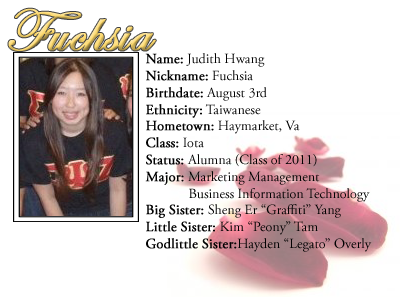
<style>
.page{position:relative;width:400px;height:300px;background:#ffffff}
.page>*{position:absolute;margin:0}
.t1{font:60px "EdwardianScriptITC";font-weight:bold}
.t2{font:14px "AGaramondPro-Regular";color:#000000}
.t3{font:14px "AGaramondPro-Regular";color:#000000;font-weight:bold}
</style>
<div class="page">
<p class="t1" style="left:8px;top:8px;width:148px;height:43px">Fuchsia</p>
<p class="t2" style="left:145px;top:53px;width:227px;height:199px"><span class="t3">Name:</span> Judith Hwang<br><span class="t3">Nickname:</span> Fuchsia<br><span class="t3">Birthdate:</span> August 3rd<br><span class="t3">Ethnicity:</span> Taiwanese<br><span class="t3">Hometown:</span> Haymarket, Va<br><span class="t3">Class:</span> Iota<br><span class="t3">Status: </span>Alumna (Class of 2011)<br><span class="t3">Major:</span> Marketing Management<br>   Business Information Technology<br><span class="t3">Big Sister: </span>Sheng Er “Graffiti” Yang<br><span class="t3">Little Sister: </span>Kim “Peony” Tam<br><span class="t3">Godlittle Sister:</span>Hayden “Legato” Overly</p>
</div>
